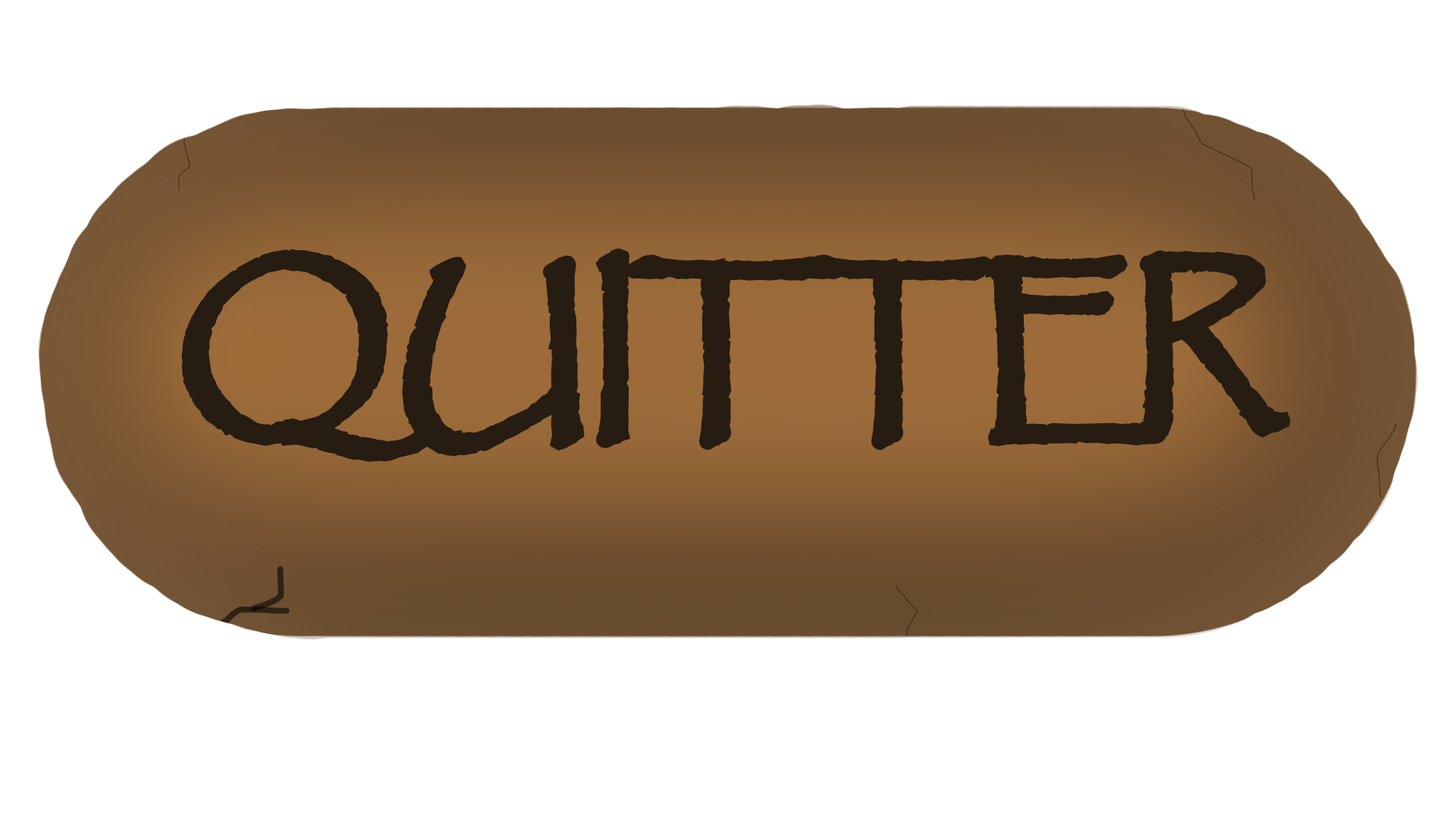
<style>
.page{position:relative;width:1456px;height:819px;background:#ffffff}
.page>*{position:absolute;margin:0}
.t1{font:165.6px "PapyrusStd";letter-spacing:0.01em;color:#261c12;font-weight:bold}
</style>
<div class="page">
<p class="t1" style="left:181px;top:248px;width:1110px;height:214px">QUITTER</p>
</div>
